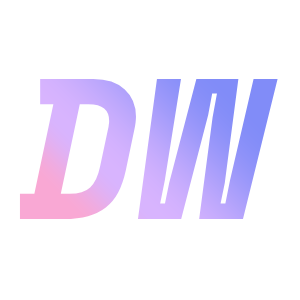
<style>
.page{position:relative;width:300px;height:300px;background:#ffffff}
.page>*{position:absolute;margin:0}
.t1{font:200px "SpaceMono-BoldItalic"}
</style>
<div class="page">
<p class="t1" style="left:19px;top:79px;width:259px;height:140px">DW</p>
</div>
